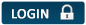
<style>
.page{position:relative;width:86px;height:25px}
.page>*{position:absolute;margin:0}
.t1{font:14px "Calibri";color:#ffffff;font-weight:bold}
</style>
<div class="page">
<p class="t1" style="left:12px;top:9px;width:37px;height:10px">LOGIN</p>
</div>
